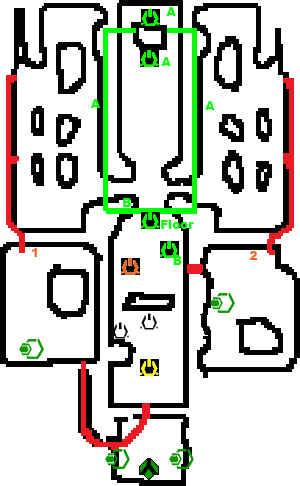
<style>
.page{position:relative;width:300px;height:486px;background:#ffffff}
.page>*{position:absolute;margin:0}
.t1{font:12px "Arial-Black";color:#00ff00}
.t2{font:12px "Arial-Black";color:#f26522}
</style>
<div class="page">
<p class="t1" style="left:166px;top:7px;width:10px;height:9px">A</p>
<p class="t1" style="left:161px;top:57px;width:10px;height:9px">A</p>
<p class="t1" style="left:90px;top:99px;width:10px;height:9px">A</p>
<p class="t1" style="left:205px;top:101px;width:10px;height:9px">A</p>
<p class="t1" style="left:123px;top:198px;width:8px;height:9px">B</p>
<p class="t1" style="left:161px;top:220px;width:33px;height:9px">Floor</p>
<p class="t2" style="left:32px;top:248px;width:5px;height:9px">1</p>
<p class="t1" style="left:173px;top:256px;width:9px;height:9px">B</p>
<p class="t2" style="left:249px;top:251px;width:8px;height:9px">2</p>
</div>
